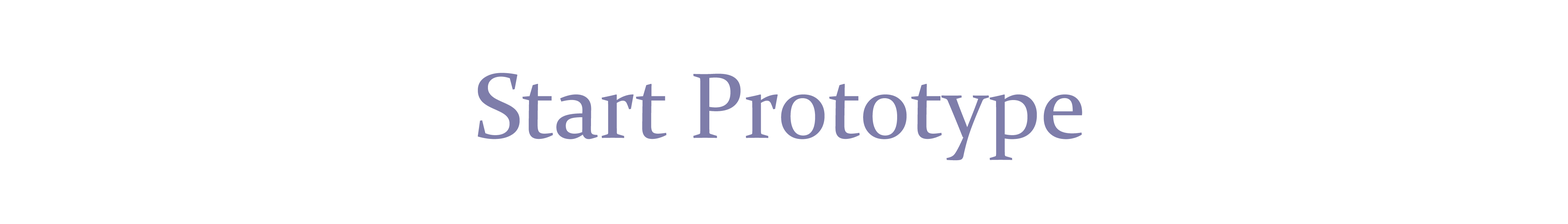
<style>
.page{position:relative;width:1568px;height:224px;background:#ffffff}
.page>*{position:absolute;margin:0}
.t1{font:93.3px "Constantia";color:#7e7daa}
</style>
<div class="page">
<p class="t1" style="left:477px;top:73px;width:605px;height:88px">Start Prototype</p>
</div>
